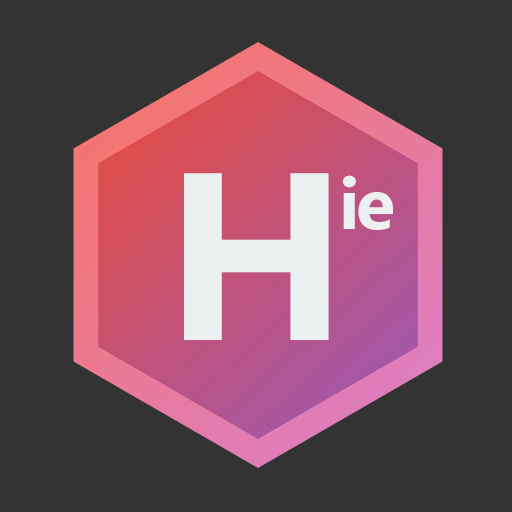
<style>
.page{position:relative;width:512px;height:512px;background:#333333}
.page>*{position:absolute;margin:0}
.t1{font:238px "Gadugi-Bold";letter-spacing:-0.04em;color:#ecf0f1}
.t2{font:72px "Gadugi-Bold";letter-spacing:-0.04em;color:#ecf0f1}
</style>
<div class="page">
<p class="t1" style="left:184px;top:173px;width:145px;height:167px">H</p>
<p class="t2" style="left:343px;top:175px;width:50px;height:55px">ie</p>
</div>
